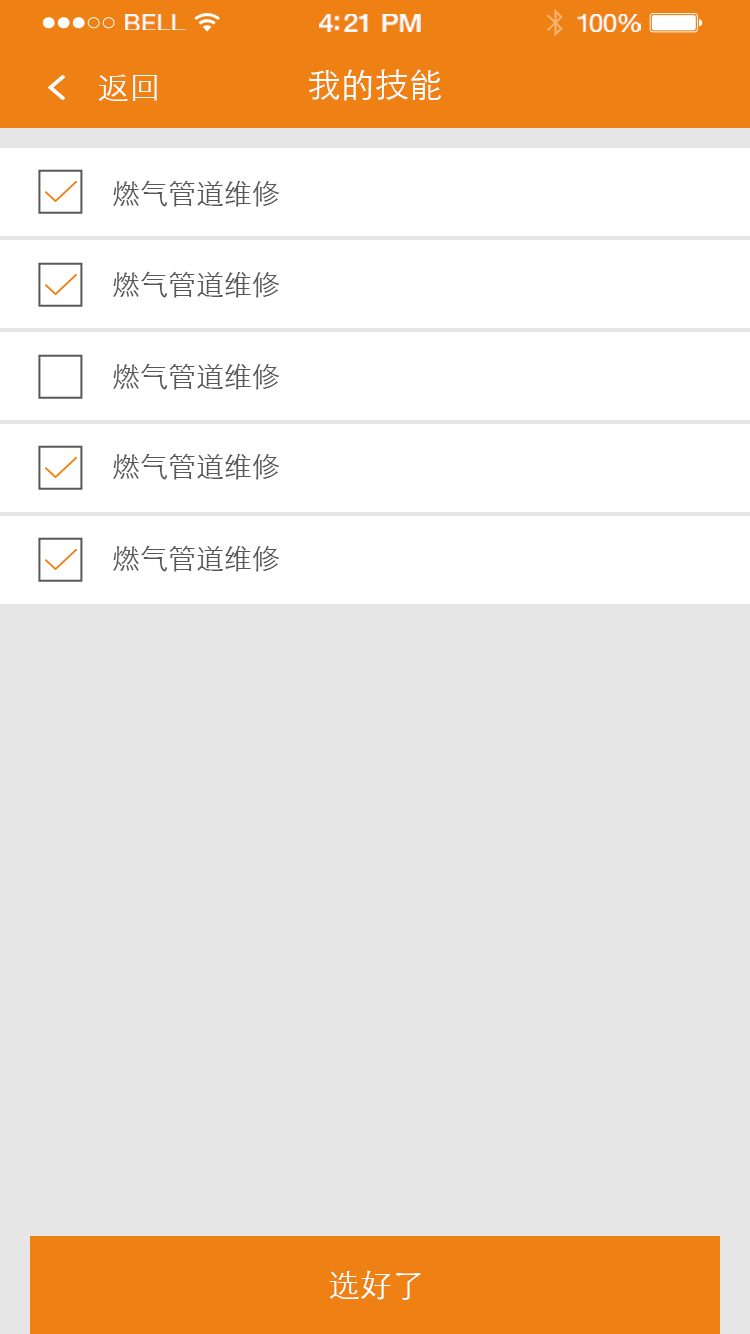
<style>
.page{position:relative;width:750px;height:1334px;background:#e6e6e6}
.page>*{position:absolute;margin:0}
.t1{font:23.3px "HelveticaNeue";letter-spacing:0.02em;color:#ffffff;scale:1.06 1}
.t2{font:25.3px "HelveticaNeue-Medium";letter-spacing:-0.02em;color:#ffffff;scale:1.06 1}
.t3{font:24.3px "HelveticaNeue";letter-spacing:-0.02em;color:#ffffff;scale:1.06 1}
.t4{font:32px "STXihei";color:#ffffff}
.t5{font:34px "STXihei";color:#ffffff}
.t6{font:28px "STXihei";color:#595757}
</style>
<div class="page">
<p class="t1" style="left:125px;top:14px;width:61px;height:16px">BELL</p>
<p class="t2" style="left:319px;top:14px;width:102px;height:18px">4:21 PM</p>
<p class="t3" style="left:577px;top:14px;width:64px;height:18px">100%</p>
<p class="t4" style="left:98px;top:74px;width:59px;height:27px">返回</p>
<p class="t5" style="left:309px;top:69px;width:132px;height:32px">我的技能</p>
<p class="t6" style="left:113px;top:180px;width:167px;height:27px">燃气管道维修</p>
<p class="t6" style="left:113px;top:271px;width:167px;height:27px">燃气管道维修</p>
<p class="t6" style="left:113px;top:363px;width:167px;height:27px">燃气管道维修</p>
<p class="t6" style="left:113px;top:453px;width:167px;height:27px">燃气管道维修</p>
<p class="t6" style="left:113px;top:545px;width:167px;height:27px">燃气管道维修</p>
<p class="t4" style="left:329px;top:1270px;width:92px;height:30px">选好了</p>
</div>
